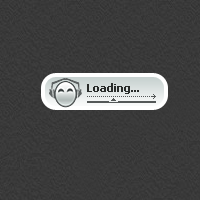
<style>
.page{position:relative;width:200px;height:200px}
.page>*{position:absolute;margin:0}
.t1{font:11px "Tahoma-Bold";color:#282b29}
</style>
<div class="page">
<p class="t1" style="left:87px;top:83px;width:52px;height:11px">Loading...</p>
</div>
